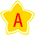
<style>
.page{position:relative;width:35px;height:35px;background:#ffffff}
.page>*{position:absolute;margin:0}
.t1{font:17.2px "AdobeHeitiStd-Regular";color:#ff0000;scale:0.92 1}
</style>
<div class="page">
<p class="t1" style="left:13px;top:13px;width:10px;height:14px">A</p>
</div>
